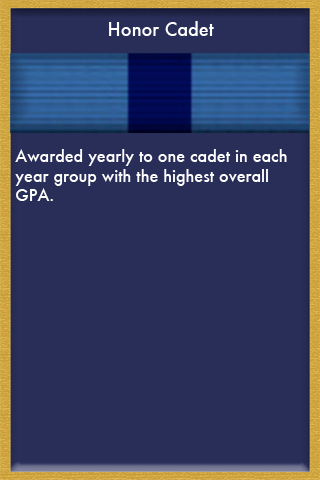
<style>
.page{position:relative;width:320px;height:480px;background:#292e59}
.page>*{position:absolute;margin:0}
.t1{font:18px "Futura-Medium";color:#ffffff}
.t2{font:16px "Futura-Medium";color:#ffffff}
</style>
<div class="page">
<p class="t1" style="left:109px;top:21px;width:105px;height:15px">Honor Cadet</p>
<p class="t2" style="left:15px;top:149px;width:272px;height:52px">Awarded yearly to one cadet in each <br>year group with the highest overall <br>GPA.</p>
</div>
